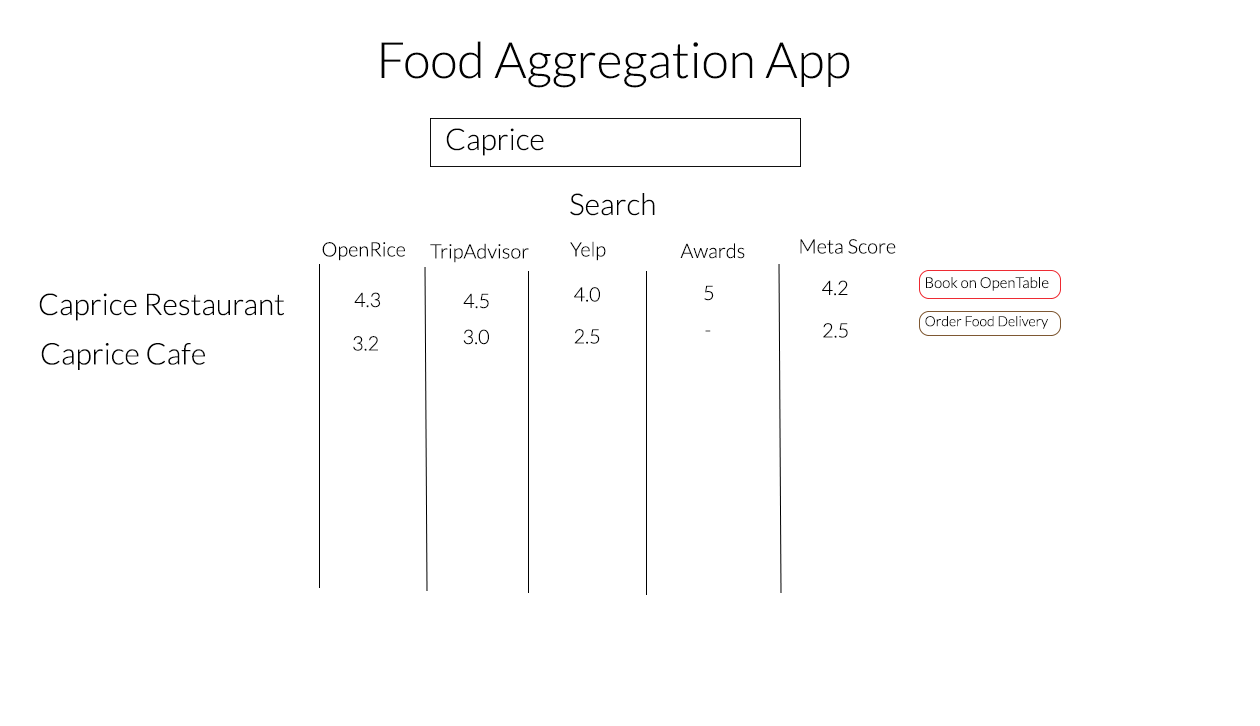
<style>
.page{position:relative;width:1260px;height:726px;background:#ffffff}
.page>*{position:absolute;margin:0}
.t1{font:50px "Lato-Light";color:#010101}
.t2{font:30px "Lato-Light";color:#000000}
.t3{font:20px "Lato-Light";color:#000000}
.t4{font:15px "Lato-Light";color:#000000}
.t5{font:14px "Lato-Light";color:#000000}
.t6{font:20px "Lato-Light"}
</style>
<div class="page">
<p class="t1" style="left:381px;top:41px;width:469px;height:47px">Food Aggregation App</p>
<p class="t2" style="left:446px;top:128px;width:98px;height:28px">Caprice</p>
<p class="t2" style="left:570px;top:193px;width:85px;height:23px">Search</p>
<p class="t3" style="left:322px;top:242px;width:83px;height:19px">OpenRice</p>
<p class="t3" style="left:430px;top:243px;width:99px;height:20px">TripAdvisor</p>
<p class="t3" style="left:570px;top:241px;width:36px;height:20px">Yelp</p>
<p class="t3" style="left:680px;top:243px;width:65px;height:16px">Awards</p>
<p class="t3" style="left:800px;top:239px;width:96px;height:15px">Meta Score</p>
<p class="t3" style="left:822px;top:280px;width:26px;height:16px">4.2</p>
<p class="t4" style="left:926px;top:277px;width:123px;height:14px">Book on OpenTable</p>
<p class="t2" style="left:39px;top:293px;width:245px;height:28px">Caprice Restaurant</p>
<p class="t3" style="left:354px;top:292px;width:27px;height:16px">4.3</p>
<p class="t3" style="left:463px;top:293px;width:26px;height:16px">4.5</p>
<p class="t3" style="left:574px;top:287px;width:26px;height:15px">4.0</p>
<p class="t3" style="left:704px;top:285px;width:10px;height:16px">5</p>
<p class="t5" style="left:925px;top:316px;width:123px;height:13px">Order Food Delivery</p>
<p class="t3" style="left:463px;top:329px;width:26px;height:16px">3.0</p>
<p class="t3" style="left:574px;top:329px;width:26px;height:15px">2.5</p>
<p class="t3" style="left:823px;top:323px;width:25px;height:15px">2.5</p>
<p class="t3" style="left:353px;top:336px;width:25px;height:15px">3.2</p>
<p class="t6" style="left:705px;top:330px;width:6px;height:2px">-</p>
<p class="t2" style="left:41px;top:343px;width:164px;height:27px">Caprice Cafe</p>
</div>
